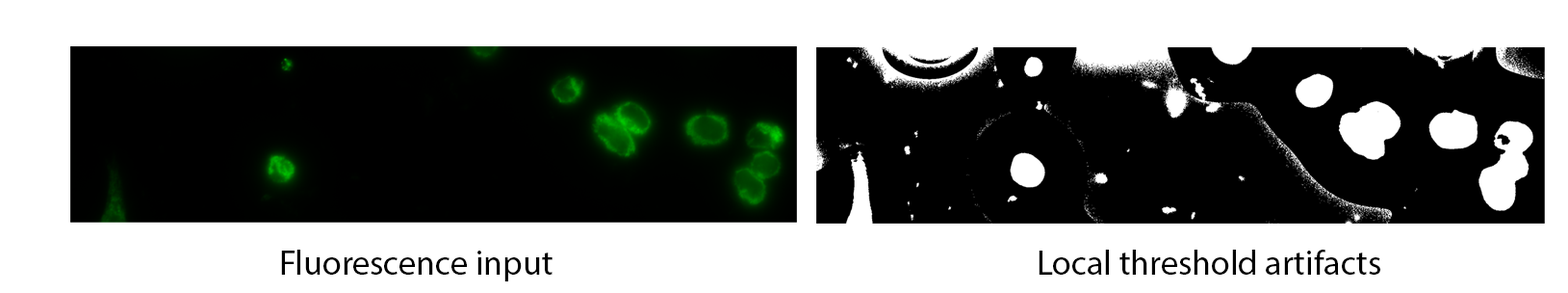
<style>
.page{position:relative;width:1568px;height:293px;background:#ffffff}
.page>*{position:absolute;margin:0}
.t1{font:34.7px "MyriadPro-Regular";color:#000000}
</style>
<div class="page">
<p class="t1" style="left:281px;top:249px;width:272px;height:32px">Fluorescence input</p>
<p class="t1" style="left:1039px;top:249px;width:341px;height:25px">Local threshold artifacts</p>
</div>
